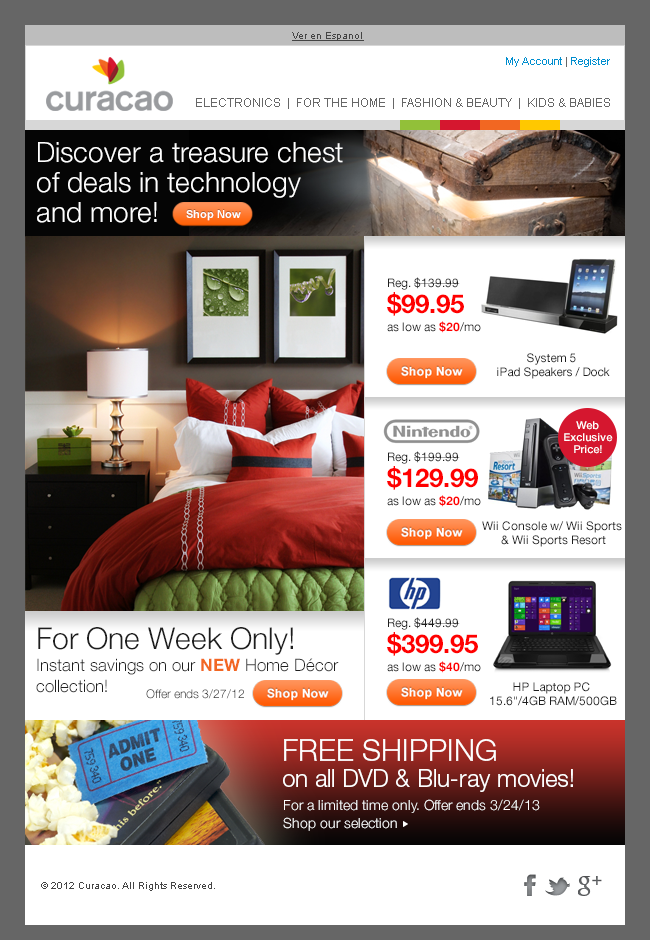
<style>
.page{position:relative;width:650px;height:940px;background:#ffffff}
.page>*{position:absolute;margin:0}
.t1{font:10px "ArialMT";color:#444444;text-decoration:underline}
.t2{font:11px "ArialMT";color:#008ecf}
.t3{font:11px "ArialMT";color:#666666}
.t4{font:12px "ArialMT";color:#666666}
.t5{font:28px/30px "HelveticaNeue-Light";color:#ffffff}
.t6{font:11px "Arial-BoldMT";color:#ffffff}
.t7{font:12px/18px "HelveticaNeue-Roman";color:#1e1e1e}
.t8{font:26px/26px "HelveticaNeue-Bold";color:#ff0000}
.t9{font:12px/18px "HelveticaNeue-Bold";color:#ff0000}
.t10{font:12px/14px "HelveticaNeue-Roman";color:#1e1e1e}
.t11{font:11px/12px "HelveticaNeue-Medium";color:#ffffff}
.t12{font:17px/22px "HelveticaNeue-Light";color:#1e1e1e}
.t13{font:30px/18px "HelveticaNeue-Light";color:#1e1e1e}
.t14{font:17px/22px "HelveticaNeue-Bold";color:#f26722}
.t15{font:17px/21px "HelveticaNeue-Light";color:#1e1e1e}
.t16{font:12px "HelveticaNeue-Light"}
.t17{font:24px/26px "HelveticaNeue-Light";color:#ffffff}
.t18{font:30px/32px "HelveticaNeue-Light";color:#ffffff}
.t19{font:14px/32px "HelveticaNeue-Light";color:#ffffff}
.t20{font:14px/18px "HelveticaNeue-Light";color:#ffffff}
.t21{font:10px "ArialMT";color:#444444}
</style>
<div class="page">
<p class="t1" style="left:292px;top:32px;width:72px;height:9px">Ver en Espanol</p>
<p class="t2" style="left:506px;top:57px;width:104px;height:10px">My Account<span class="t3"> | </span>Register</p>
<p class="t4" style="left:196px;top:98px;width:414px;height:11px">ELECTRONICS  |  FOR THE HOME  |  FASHION &amp; BEAUTY  |  KIDS &amp; BABIES</p>
<p class="t5" style="left:37px;top:142px;width:306px;height:81px">Discover a treasure chest <br>of deals in technology <br>and more!</p>
<p class="t6" style="left:186px;top:210px;width:55px;height:11px">Shop Now</p>
<p class="t7" style="left:387px;top:277px;width:94px;height:56px">Reg. $139.99<br><span class="t8">$99.95<br></span>as low as <span class="t9">$20</span>/mo</p>
<p class="t10" style="left:497px;top:353px;width:113px;height:26px;text-align:center">System 5 <br>iPad Speakers / Dock</p>
<p class="t11" style="left:564px;top:421px;width:49px;height:33px;text-align:center">Web<br>Exclusive<br>Price!</p>
<p class="t7" style="left:387px;top:451px;width:94px;height:56px">Reg. $199.99<br><span class="t8">$129.99<br></span>as low as <span class="t9">$20</span>/mo</p>
<p class="t10" style="left:482px;top:521px;width:140px;height:26px;text-align:center">Wii Console w/ Wii Sports<br> &amp; Wii Sports Resort</p>
<p class="t7" style="left:387px;top:617px;width:94px;height:56px">Reg. $449.99<br><span class="t8">$399.95<br></span>as low as <span class="t9">$40</span>/mo</p>
<p class="t12" style="left:36px;top:627px;width:303px;height:66px"><span class="t13">For One Week Only!<br></span>Instant savings on our <span class="t14">NEW</span> Home Décor <span class="t15">collection!</span></p>
<p class="t16" style="left:146px;top:689px;width:98px;height:10px">Offer ends 3/27/12</p>
<p class="t10" style="left:490px;top:682px;width:127px;height:24px;text-align:center">HP Laptop PC <br>15.6"/4GB RAM/500GB</p>
<p class="t17" style="left:283px;top:739px;width:290px;height:53px"><span class="t18">FREE SHIPPING<br></span>on all DVD &amp; Blu-ray movies!</p>
<p class="t19" style="left:283px;top:799px;width:257px;height:32px">For a limited time only. Offer ends 3/24/13<br><span class="t20">Shop our selection</span></p>
<p class="t21" style="left:41px;top:882px;width:174px;height:9px">© 2012 Curacao. All Rights Reserved.</p>
</div>
